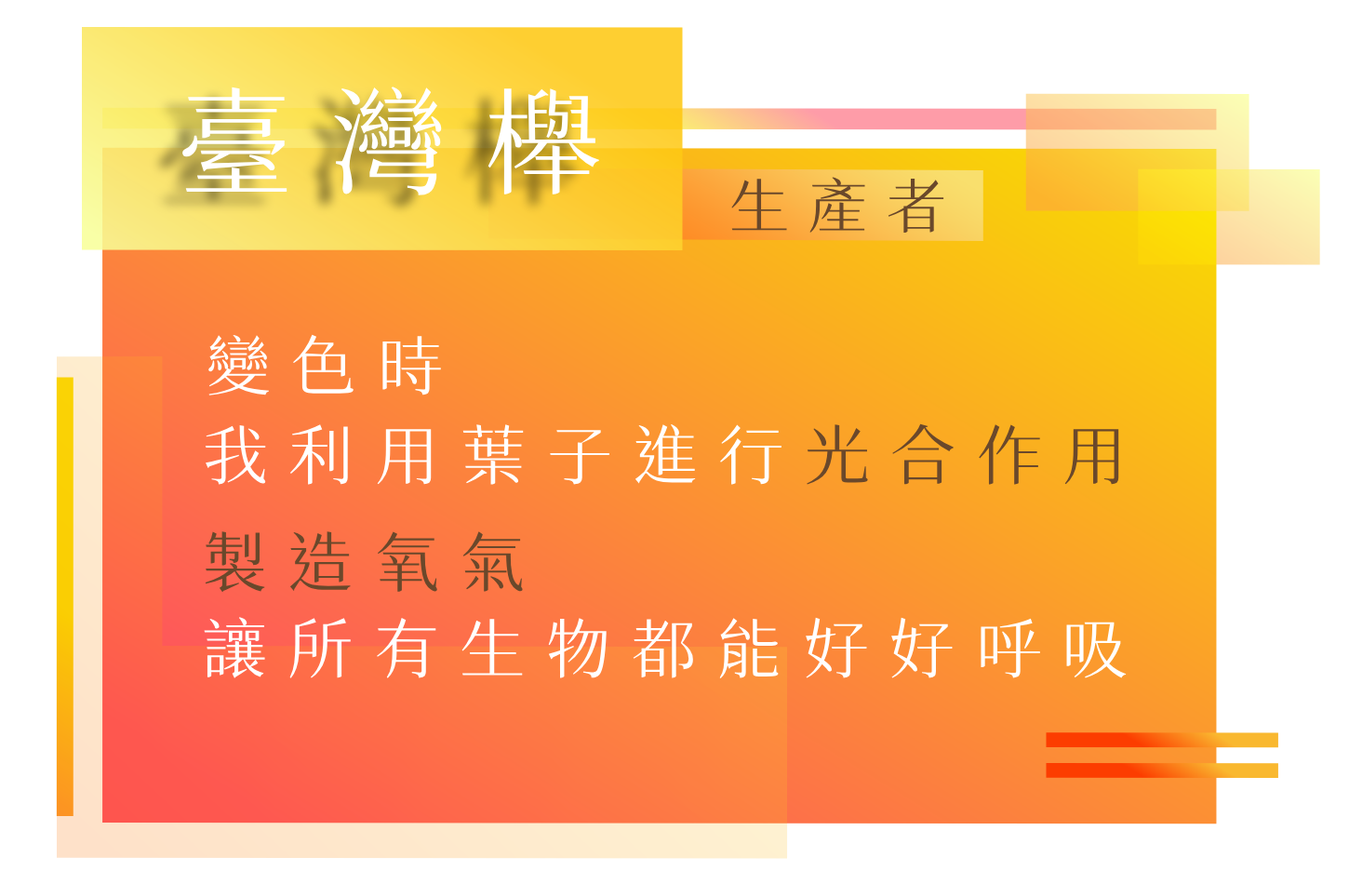
<style>
.page{position:relative;width:1349px;height:884px;background:#ffffff}
.page>*{position:absolute;margin:0}
.t1{font:116.3px "SweiSpringCJKtc-Regular";letter-spacing:0.32em;color:#ffffff;text-transform:uppercase}
.t2{font:59.5px "SweiSpringCJKtc-Regular";letter-spacing:0.32em;color:#6a482b;text-transform:uppercase}
.t3{font:65.1px "SweiSpringCJKtc-Regular";letter-spacing:0.32em;color:#ffffff;text-transform:uppercase}
.t4{font:65.1px "SweiSpringCJKtc-Regular";letter-spacing:0.32em;color:#6a482b;text-transform:uppercase}
</style>
<div class="page">
<p class="t1" style="left:180px;top:87px;width:419px;height:108px">臺灣櫸</p>
<p class="t2" style="left:731px;top:177px;width:213px;height:56px">生產者</p>
<p class="t3" style="left:207px;top:334px;width:234px;height:61px">變色時</p>
<p class="t3" style="left:205px;top:423px;width:914px;height:62px">我利用葉子進行<span class="t4">光合作用</span></p>
<p class="t4" style="left:205px;top:531px;width:319px;height:62px">製造氧氣</p>
<p class="t3" style="left:204px;top:617px;width:923px;height:62px">讓所有生物都能好好呼吸</p>
</div>
